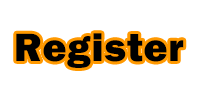
<style>
.page{position:relative;width:200px;height:100px;background:#ffffff}
.page>*{position:absolute;margin:0}
.t1{font:40.6px "FranklinGothic-Heavy";letter-spacing:0.025em;color:#ff8400}
</style>
<div class="page">
<p class="t1" style="left:16px;top:33px;width:168px;height:35px">Register</p>
</div>
